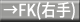
<style>
.page{position:relative;width:80px;height:22px;background:#9b9b99}
.page>*{position:absolute;margin:0}
.t1{font:16.8px "SourceHanSansTW-Regular";color:#ffffff;font-weight:bold;scale:0.86 1}
</style>
<div class="page">
<p class="t1" style="left:3px;top:2px;width:72px;height:18px">→FK(右手)</p>
</div>
